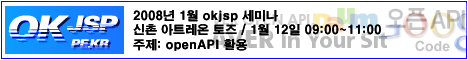
<style>
.page{position:relative;width:468px;height:60px;background:#ffffff}
.page>*{position:absolute;margin:0}
.t1{font:12px "H2gtrE";color:#000000}
</style>
<div class="page">
<p class="t1" style="left:133px;top:10px;width:248px;height:41px">2008년 1월 okjsp 세미나<br>신촌 아트레온 토즈 / 1월 12일 09:00~11:00<br>주제: openAPI 활용</p>
</div>
